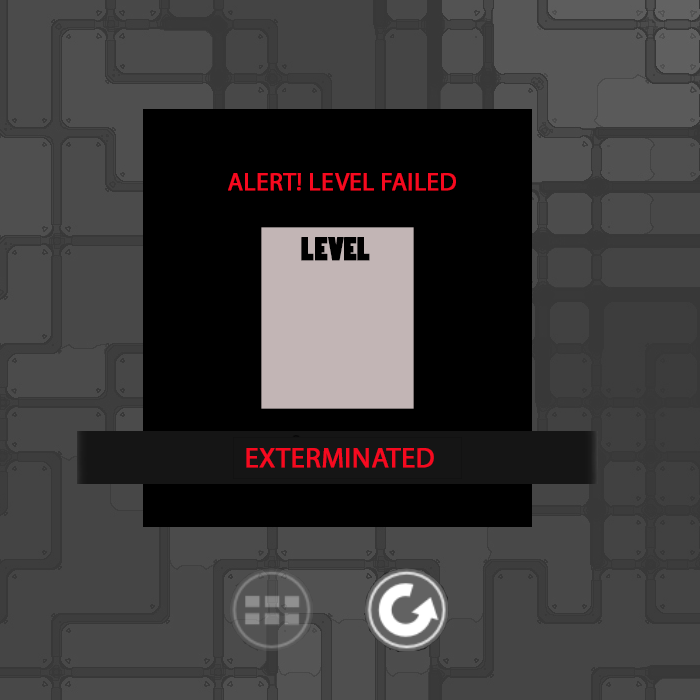
<style>
.page{position:relative;width:700px;height:700px;background:#000000}
.page>*{position:absolute;margin:0}
.t1{font:25px "MyriadPro-Regular";color:#f6091f;font-weight:bold}
.t2{font:30px "PoplarStd";color:#000000;font-weight:bold}
.t3{font:28px "MyriadPro-Regular";color:#f6091f;font-weight:bold}
</style>
<div class="page">
<p class="t1" style="left:228px;top:173px;width:228px;height:18px">ALERT! LEVEL FAILED</p>
<p class="t2" style="left:301px;top:237px;width:69px;height:24px">LEVEL</p>
<p class="t3" style="left:246px;top:448px;width:188px;height:20px">EXTERMINATED</p>
</div>
